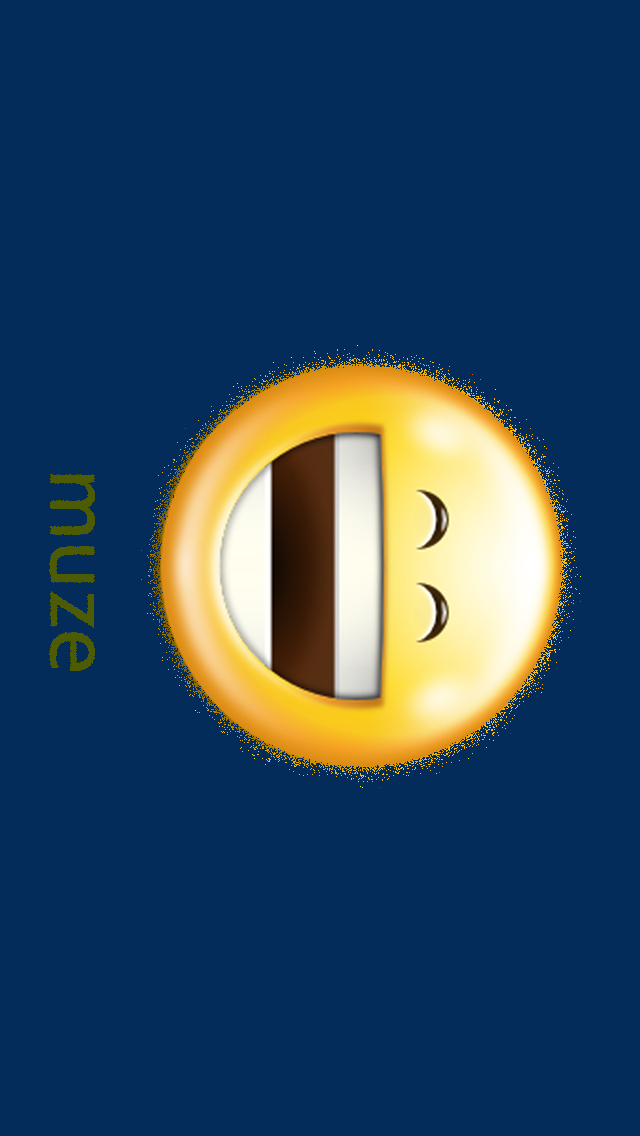
<style>
.page{position:relative;width:640px;height:1136px;background:#042c5b}
.page>*{position:absolute;margin:0}
.t1{font:85px "Aller";color:#4c5b04}
</style>
<div class="page">
<p class="t1" style="left:49px;top:474px;width:46px;height:197px;rotate:90deg">muze</p>
</div>
